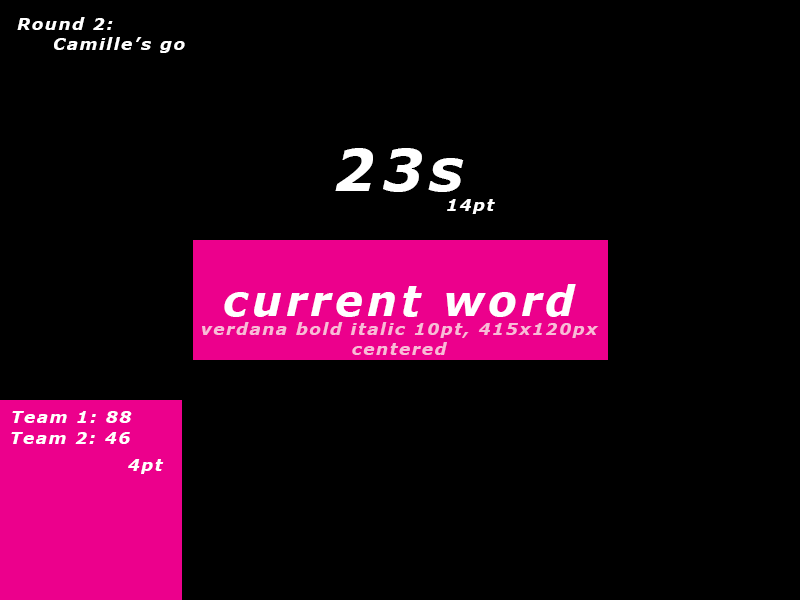
<style>
.page{position:relative;width:800px;height:600px;background:#000000}
.page>*{position:absolute;margin:0}
.t1{font:16.7px "Verdana-BoldItalic";letter-spacing:0.1em;color:#ffffff}
.t2{font:58.4px "Verdana-BoldItalic";letter-spacing:0.1em;color:#ffffff}
.t3{font:41.7px "Verdana-BoldItalic";letter-spacing:0.1em;color:#ffffff}
.t4{font:16.7px "Verdana-BoldItalic";letter-spacing:0.1em;color:#f8bbd8}
</style>
<div class="page">
<p class="t1" style="left:17px;top:17px;width:168px;height:36px">Round 2:<br> Camille’s go</p>
<p class="t2" style="left:335px;top:148px;width:129px;height:44px">23s</p>
<p class="t1" style="left:447px;top:199px;width:48px;height:15px">14pt</p>
<p class="t3" style="left:224px;top:284px;width:352px;height:33px">current word</p>
<p class="t4" style="left:202px;top:322px;width:397px;height:33px;text-align:center">verdana bold italic 10pt, 415x120px<br>centered</p>
<p class="t1" style="left:12px;top:411px;width:120px;height:12px">Team 1: 88</p>
<p class="t1" style="left:11px;top:432px;width:119px;height:12px">Team 2: 46</p>
<p class="t1" style="left:128px;top:459px;width:36px;height:15px">4pt</p>
</div>
